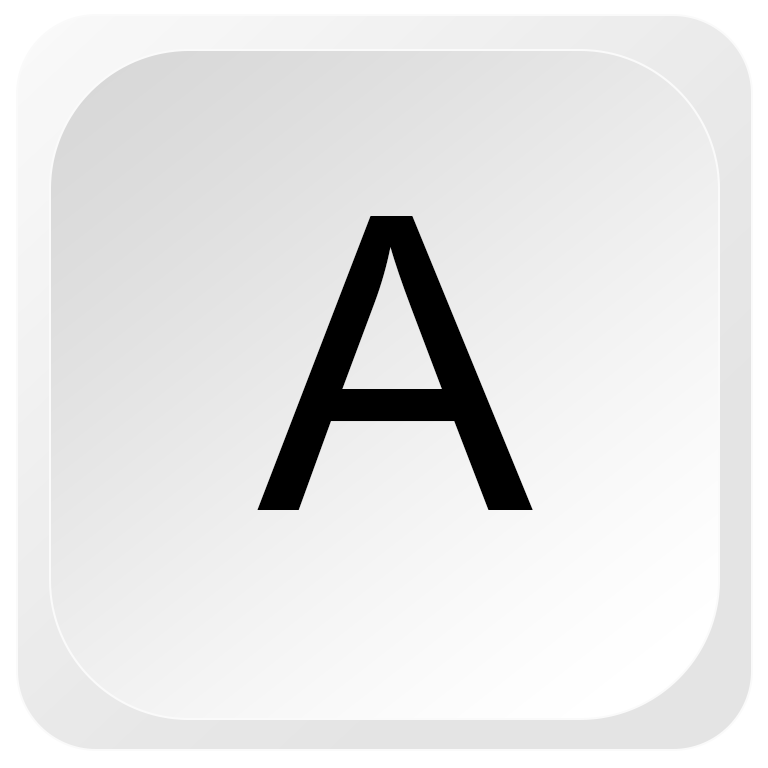
<style>
.page{position:relative;width:768px;height:768px}
.page>*{position:absolute;margin:0}
.t1{font:411px "ArialMT";color:#000000}
</style>
<div class="page">
<p class="t1" style="left:257px;top:216px;width:276px;height:294px">A</p>
</div>
